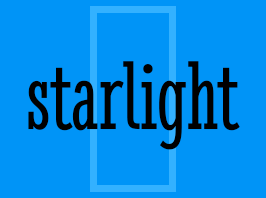
<style>
.page{position:relative;width:266px;height:198px;background:#0094f7}
.page>*{position:absolute;margin:0}
.t1{font:101.3px "StintUltraCondensed-Regular";color:#000000}
</style>
<div class="page">
<p class="t1" style="left:28px;top:61px;width:212px;height:89px">starlight</p>
</div>
